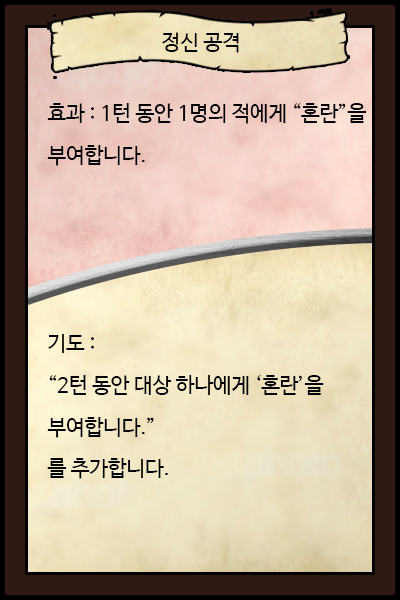
<style>
.page{position:relative;width:400px;height:600px}
.page>*{position:absolute;margin:0}
.t1{font:20.8px "NanumBarunGothic";color:#000000}
.t2{font:20.8px/41.7px "NanumBarunGothic";color:#000000}
</style>
<div class="page">
<p class="t1" style="left:161px;top:32px;width:78px;height:21px">정신 공격</p>
<p class="t2" style="left:47px;top:103px;width:320px;height:63px">효과 : 1턴 동안 1명의 적에게 “혼란”을<br>부여합니다.</p>
<p class="t2" style="left:47px;top:334px;width:277px;height:145px">기도 : <br>“2턴 동안 대상 하나에게 ‘혼란’을<br>부여합니다.”<br>를 추가합니다.</p>
</div>
